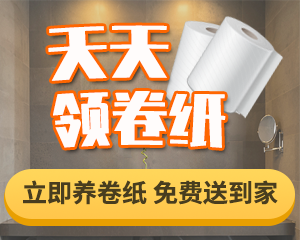
<style>
.page{position:relative;width:300px;height:240px}
.page>*{position:absolute;margin:0}
.t1{font:56px "ZhenyanGB-Regular";color:#fffcfb}
.t2{font:25px "SourceHanSansCN-Bold";color:#483d1f}
</style>
<div class="page">
<p class="t1" style="left:48px;top:25px;width:178px;height:123px">天天<br>领卷纸</p>
<p class="t2" style="left:23px;top:180px;width:255px;height:25px">立即养卷纸 免费送到家</p>
</div>
